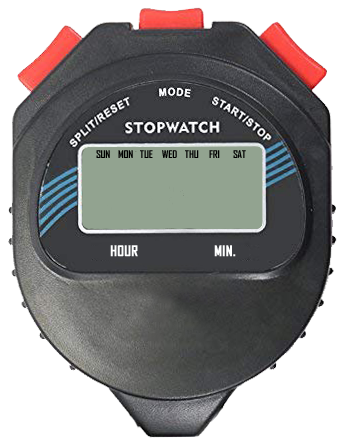
<style>
.page{position:relative;width:345px;height:448px;background:#ffffff}
.page>*{position:absolute;margin:0}
.t1{font:10px "AgencyFB-Bold";color:#000000}
.t2{font:14px "AgencyFB-Bold";color:#feffff;font-weight:bold}
</style>
<div class="page">
<p class="t1" style="left:96px;top:150px;width:14px;height:8px">SUN</p>
<p class="t1" style="left:118px;top:150px;width:15px;height:8px">MON</p>
<p class="t1" style="left:140px;top:150px;width:13px;height:8px">TUE</p>
<p class="t1" style="left:162px;top:150px;width:15px;height:8px">WED</p>
<p class="t1" style="left:185px;top:150px;width:14px;height:8px">THU</p>
<p class="t1" style="left:209px;top:150px;width:11px;height:8px">FRI</p>
<p class="t1" style="left:233px;top:150px;width:13px;height:8px">SAT</p>
<p class="t2" style="left:110px;top:245px;width:28px;height:12px">HOUR</p>
<p class="t2" style="left:214px;top:245px;width:22px;height:12px">MIN.</p>
</div>
